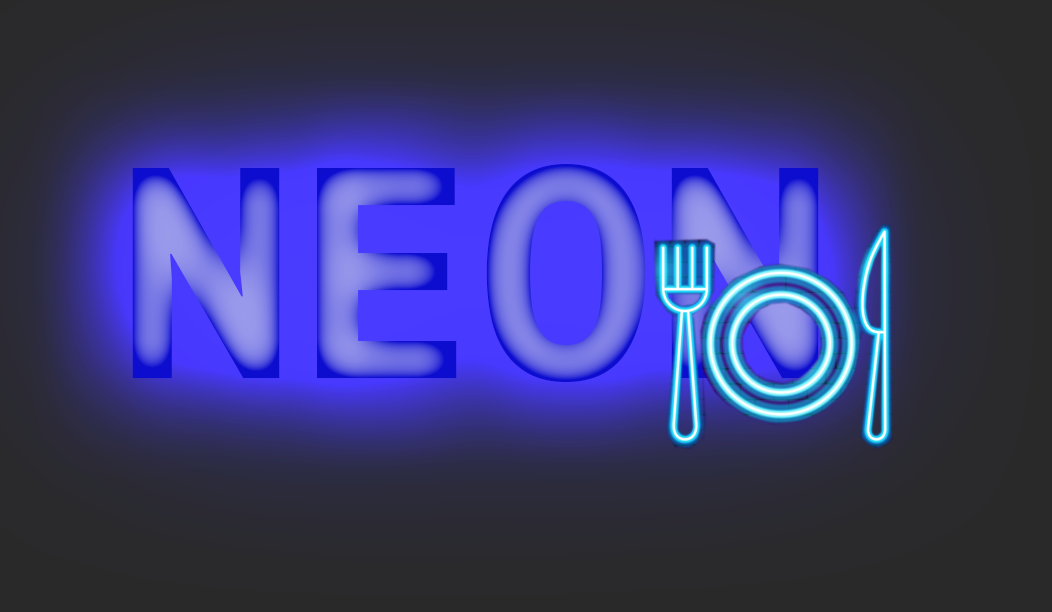
<style>
.page{position:relative;width:1052px;height:612px}
.page>*{position:absolute;margin:0}
.t1{font:300px "PTMono-Bold"}
</style>
<div class="page">
<p class="t1" style="left:132px;top:164px;width:687px;height:218px">NEON</p>
</div>
